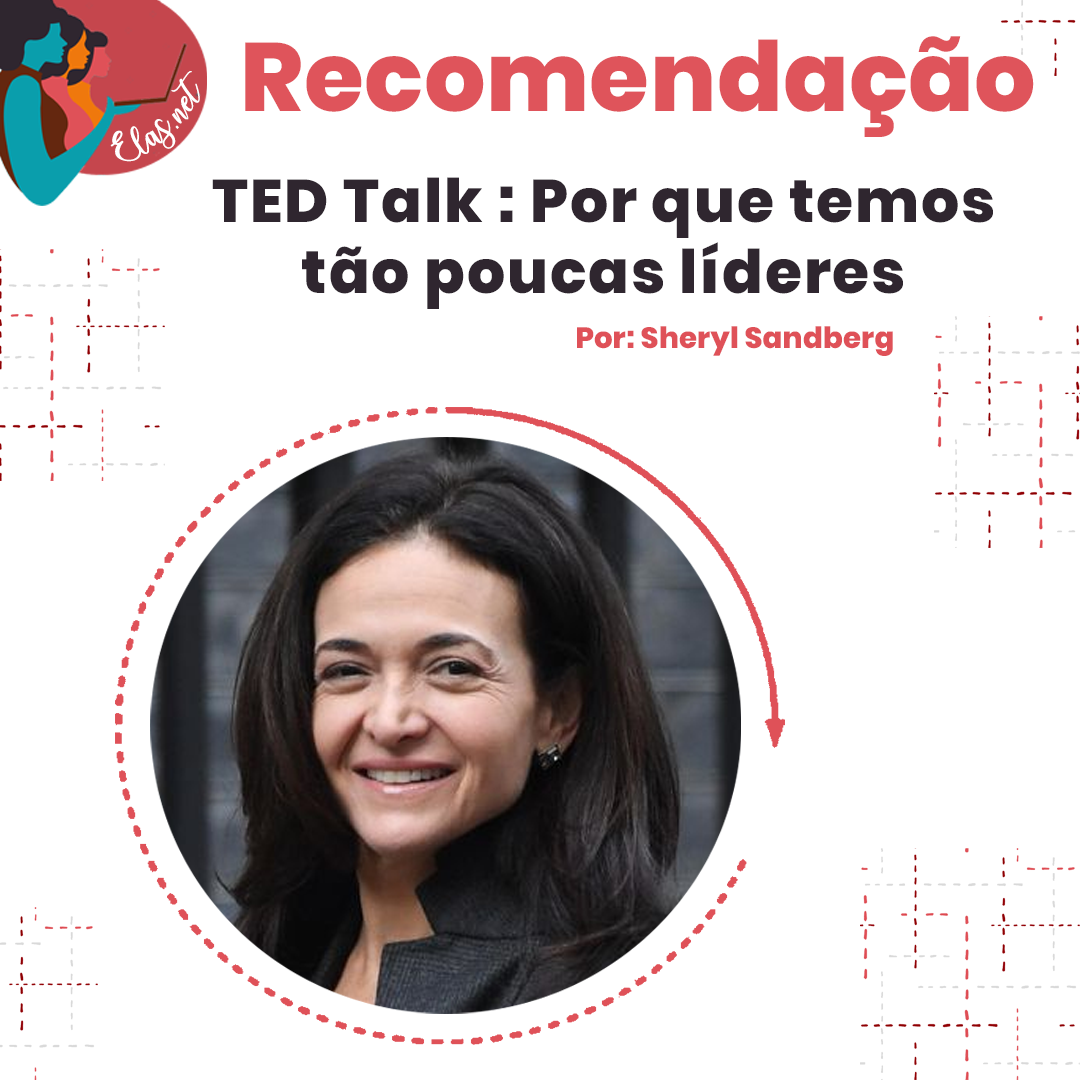
<style>
.page{position:relative;width:1080px;height:1080px;background:#ffffff}
.page>*{position:absolute;margin:0}
.t1{font:96.7px "Poppins-ExtraBold";letter-spacing:0.005em;color:#df5158}
.t2{font:25.7px "charlinda-Regular";color:#ffffff;scale:1.18 1}
.t3{font:60px/71.3px "Poppins-ExtraBold";letter-spacing:0.03em;color:#2f262f}
.t4{font:29.2px "Poppins-ExtraBold";letter-spacing:0.005em;color:#df5158}
</style>
<div class="page">
<p class="t1" style="left:245px;top:36px;width:789px;height:101px">Recomendação</p>
<p class="t2" style="left:110px;top:71px;width:90px;height:91px;rotate:-43deg">Elas.net</p>
<p class="t3" style="left:212px;top:177px;width:781px;height:132px;text-align:center">TED Talk : Por que temos<br>tão poucas líderes</p>
<p class="t4" style="left:577px;top:326px;width:316px;height:30px">Por: Sheryl Sandberg</p>
</div>
